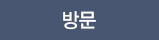
<style>
.page{position:relative;width:159px;height:40px;background:#485671}
.page>*{position:absolute;margin:0}
.t1{font:20px "YDVYGO33";letter-spacing:-0.025em;color:#ffffff;scale:0.95 1}
</style>
<div class="page">
<p class="t1" style="left:63px;top:11px;width:33px;height:19px">방문</p>
</div>
